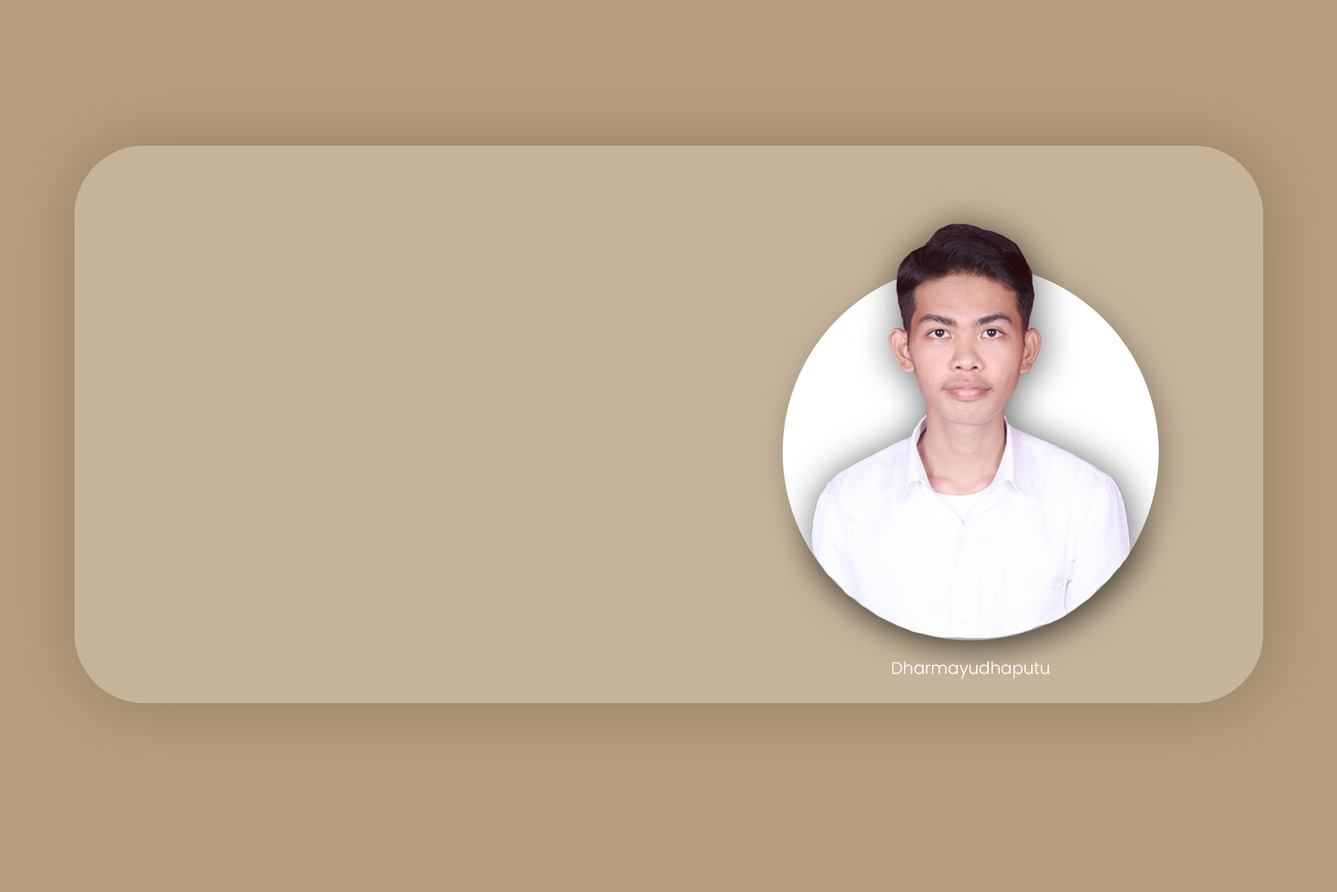
<style>
.page{position:relative;width:1337px;height:892px;background:#c6b49a}
.page>*{position:absolute;margin:0}
.t1{font:16.7px "Poppins-Light";color:#ffffff}
</style>
<div class="page">
<p class="t1" style="left:892px;top:661px;width:158px;height:17px">Dharmayudhaputu</p>
</div>
